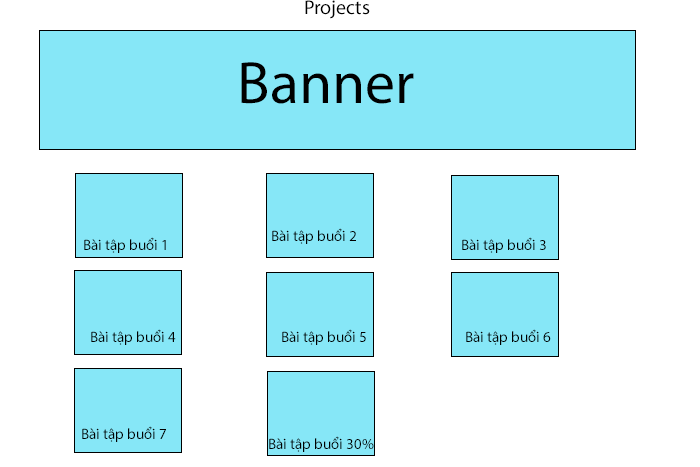
<style>
.page{position:relative;width:700px;height:467px;background:#ffffff}
.page>*{position:absolute;margin:0}
.t1{font:20px "MyriadPro-Regular";color:#000000}
.t2{font:60px "MyriadPro-Regular";color:#000000}
.t3{font:15px "MyriadPro-Regular";color:#000000}
</style>
<div class="page">
<p class="t1" style="left:305px;top:0px;width:65px;height:19px">Projects</p>
<p class="t2" style="left:241px;top:62px;width:173px;height:42px">Banner</p>
<p class="t3" style="left:272px;top:228px;width:84px;height:16px">Bài tập buổi 2</p>
<p class="t3" style="left:84px;top:237px;width:82px;height:16px">Bài tập buổi 1</p>
<p class="t3" style="left:462px;top:237px;width:84px;height:16px">Bài tập buổi 3</p>
<p class="t3" style="left:91px;top:329px;width:85px;height:16px">Bài tập buổi 4</p>
<p class="t3" style="left:282px;top:329px;width:84px;height:16px">Bài tập buổi 5</p>
<p class="t3" style="left:466px;top:329px;width:85px;height:16px">Bài tập buổi 6</p>
<p class="t3" style="left:82px;top:426px;width:84px;height:16px">Bài tập buổi 7</p>
<p class="t3" style="left:269px;top:436px;width:105px;height:16px">Bài tập buổi 30%</p>
</div>
